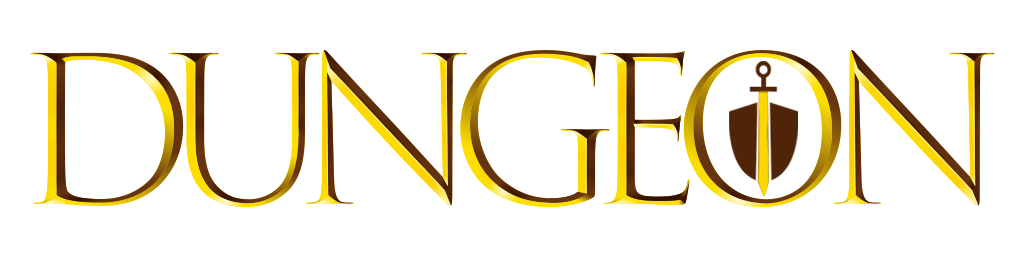
<style>
.page{position:relative;width:1024px;height:256px;background:#ffffff}
.page>*{position:absolute;margin:0}
.t1{font:200px "TrajanColor-Concept";letter-spacing:-0.12em}
</style>
<div class="page">
<p class="t1" style="left:30px;top:50px;width:965px;height:157px">DUNGEON</p>
</div>
